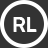
<style>
.page{position:relative;width:48px;height:48px;background:#333333}
.page>*{position:absolute;margin:0}
.t1{font:20px "CocoGothic-Bold";color:#ffffff}
</style>
<div class="page">
<p class="t1" style="left:13px;top:17px;width:24px;height:15px">RL</p>
</div>
